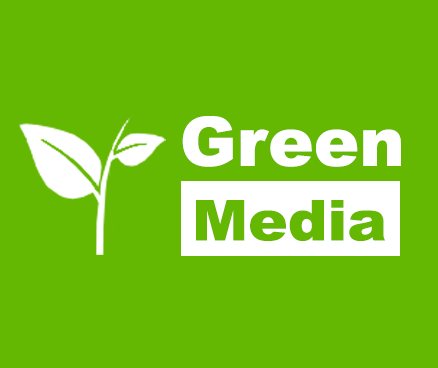
<style>
.page{position:relative;width:438px;height:368px;background:#64b802}
.page>*{position:absolute;margin:0}
.t1{font:68.3px "Arial-Black";color:#ffffff}
.t2{font:56.1px "Arial-Black";color:#64b802;scale:1.06 1}
</style>
<div class="page">
<p class="t1" style="left:182px;top:116px;width:219px;height:51px">Green</p>
<p class="t1" style="left:184px;top:115px;width:219px;height:51px">Green</p>
<p class="t2" style="left:196px;top:200px;width:189px;height:41px">Media</p>
<p class="t2" style="left:198px;top:199px;width:189px;height:41px">Media</p>
</div>
